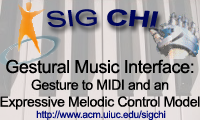
<style>
.page{position:relative;width:200px;height:120px}
.page>*{position:absolute;margin:0}
.t1{font:18px "ArialMT";letter-spacing:-0.025em;color:#00065a}
.t2{font:18px "Arial-BoldMT";letter-spacing:-0.025em;color:#00065a}
.t3{font:14px "ArialMT";letter-spacing:-0.025em;color:#000000}
.t4{font:18px "ArialMT";letter-spacing:-0.025em;color:#000000}
.t5{font:10px "ArialMT";letter-spacing:-0.025em;color:#000877}
</style>
<div class="page">
<p class="t1" style="left:47px;top:9px;width:112px;height:19px">SIG <span class="t2">CHI</span></p>
<p class="t3" style="left:0px;top:59px;width:200px;height:51px;text-align:center"><span class="t4">Gestural Music Interface:<br></span>Gesture to MIDI and an<br>Expressive Melodic Control Model</p>
<p class="t5" style="left:36px;top:110px;width:130px;height:11px">http://www.acm.uiuc.edu/sigchi</p>
</div>
